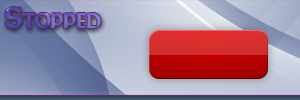
<style>
.page{position:relative;width:300px;height:100px}
.page>*{position:absolute;margin:0}
.t1{font:30px "LHFUncialCaps";font-variant:small-caps}
</style>
<div class="page">
<p class="t1" style="left:5px;top:7px;width:96px;height:21px">Stopped</p>
</div>
